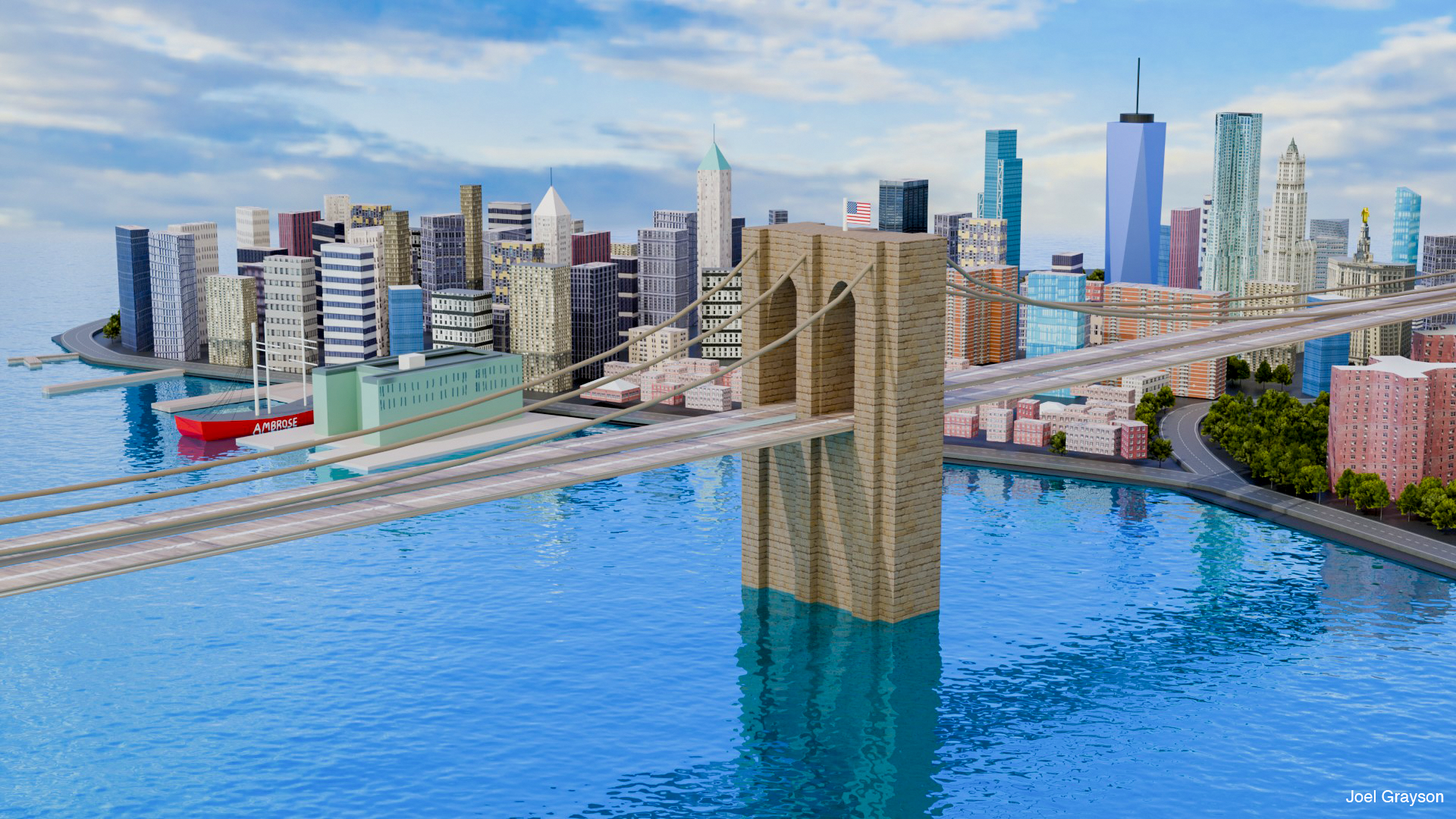
<style>
.page{position:relative;width:1456px;height:819px}
.page>*{position:absolute;margin:0}
.t1{font:16.7px "Helvetica";color:#ffffff}
</style>
<div class="page">
<p class="t1" style="left:1346px;top:790px;width:98px;height:16px">Joel Grayson</p>
</div>
